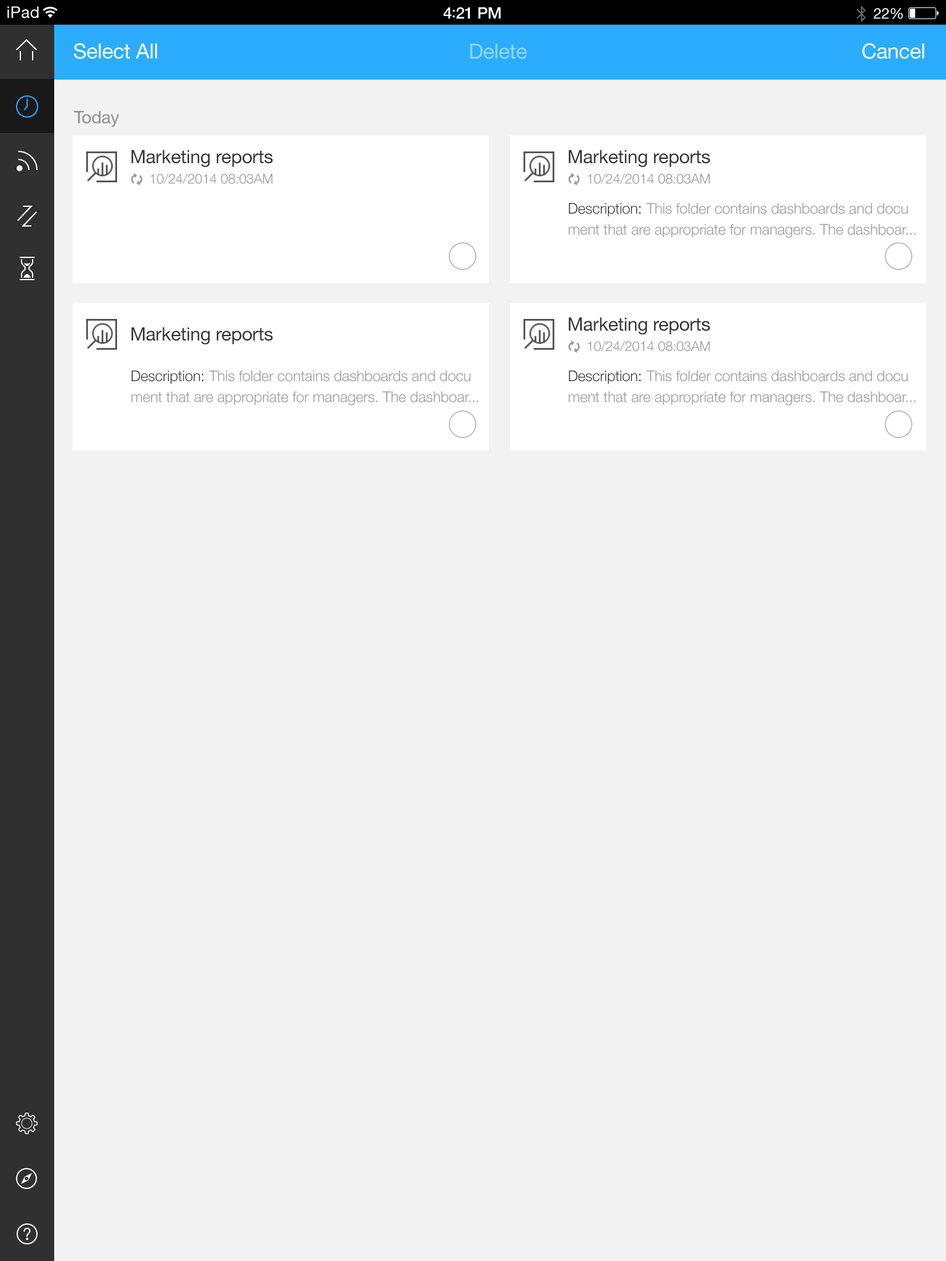
<style>
.page{position:relative;width:946px;height:1261px;background:#f2f2f2}
.page>*{position:absolute;margin:0}
.t1{font:16px "HelveticaNeue";letter-spacing:0.02em;color:#ffffff}
.t2{font:16px "HelveticaNeue-Medium";letter-spacing:-0.02em;color:#ffffff}
.t3{font:16px "Avenir-Medium";letter-spacing:-0.02em;color:#ffffff}
.t4{font:14.8px "HelveticaNeue";letter-spacing:-0.02em;color:#ffffff}
.t5{font:20.9px "HelveticaNeue";letter-spacing:-0.01em;color:#ffffff}
.t6{font:20.9px "HelveticaNeue";letter-spacing:-0.01em;color:#95d6ff}
.t7{font:17.2px "HelveticaNeue";letter-spacing:-0.01em;color:#8c8c8c}
.t8{font:18.5px "HelveticaNeue";letter-spacing:-0.01em;color:#333333}
.t9{font:13.5px "HelveticaNeue-Light";letter-spacing:-0.01em;color:#999999}
.t10{font:14.8px/20.9px "HelveticaNeue-Light";letter-spacing:-0.01em;color:#999999}
.t11{font:14.8px/20.9px "HelveticaNeue-Light";letter-spacing:-0.01em;color:#333333}
</style>
<div class="page">
<p class="t1" style="left:7px;top:6px;width:32px;height:12px">iPad</p>
<p class="t2" style="left:443px;top:7px;width:58px;height:12px">4<span class="t3">:</span>21 PM</p>
<p class="t4" style="left:873px;top:8px;width:30px;height:11px">22%</p>
<p class="t5" style="left:74px;top:43px;width:83px;height:16px">Select All</p>
<p class="t6" style="left:470px;top:44px;width:57px;height:15px">Delete</p>
<p class="t5" style="left:862px;top:43px;width:62px;height:16px">Cancel</p>
<p class="t7" style="left:74px;top:111px;width:45px;height:16px">Today</p>
<p class="t8" style="left:131px;top:150px;width:142px;height:17px">Marketing reports</p>
<p class="t8" style="left:568px;top:150px;width:142px;height:17px">Marketing reports</p>
<p class="t9" style="left:150px;top:174px;width:123px;height:10px">10/24/2014 08:03AM</p>
<p class="t9" style="left:587px;top:174px;width:123px;height:10px">10/24/2014 08:03AM</p>
<p class="t10" style="left:568px;top:203px;width:348px;height:35px"><span class="t11">Description: </span>This folder contains dashboards and docu<br>ment that are appropriate for managers. The dashboar...</p>
<p class="t8" style="left:568px;top:317px;width:142px;height:18px">Marketing reports</p>
<p class="t8" style="left:131px;top:327px;width:142px;height:18px">Marketing reports</p>
<p class="t9" style="left:587px;top:341px;width:123px;height:11px">10/24/2014 08:03AM</p>
<p class="t10" style="left:131px;top:370px;width:347px;height:35px"><span class="t11">Description: </span>This folder contains dashboards and docu<br>ment that are appropriate for managers. The dashboar...</p>
<p class="t10" style="left:568px;top:370px;width:348px;height:35px"><span class="t11">Description: </span>This folder contains dashboards and docu<br>ment that are appropriate for managers. The dashboar...</p>
</div>
